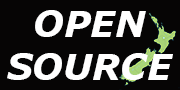
<style>
.page{position:relative;width:180px;height:90px;background:#060505}
.page>*{position:absolute;margin:0}
.t1{font:36px "Verdana-BoldItalic";color:#ffffff}
</style>
<div class="page">
<p class="t1" style="left:7px;top:10px;width:166px;height:70px;text-align:center">OPEN<br>SOURCE</p>
</div>
